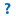
<style>
.page{position:relative;width:16px;height:16px;background:#ffffff}
.page>*{position:absolute;margin:0}
.t1{font:15.8px "MyriadPro-Bold";letter-spacing:0.075em;color:#006fb3}
</style>
<div class="page">
<p class="t1" style="left:4px;top:3px;width:7px;height:11px">?</p>
</div>
